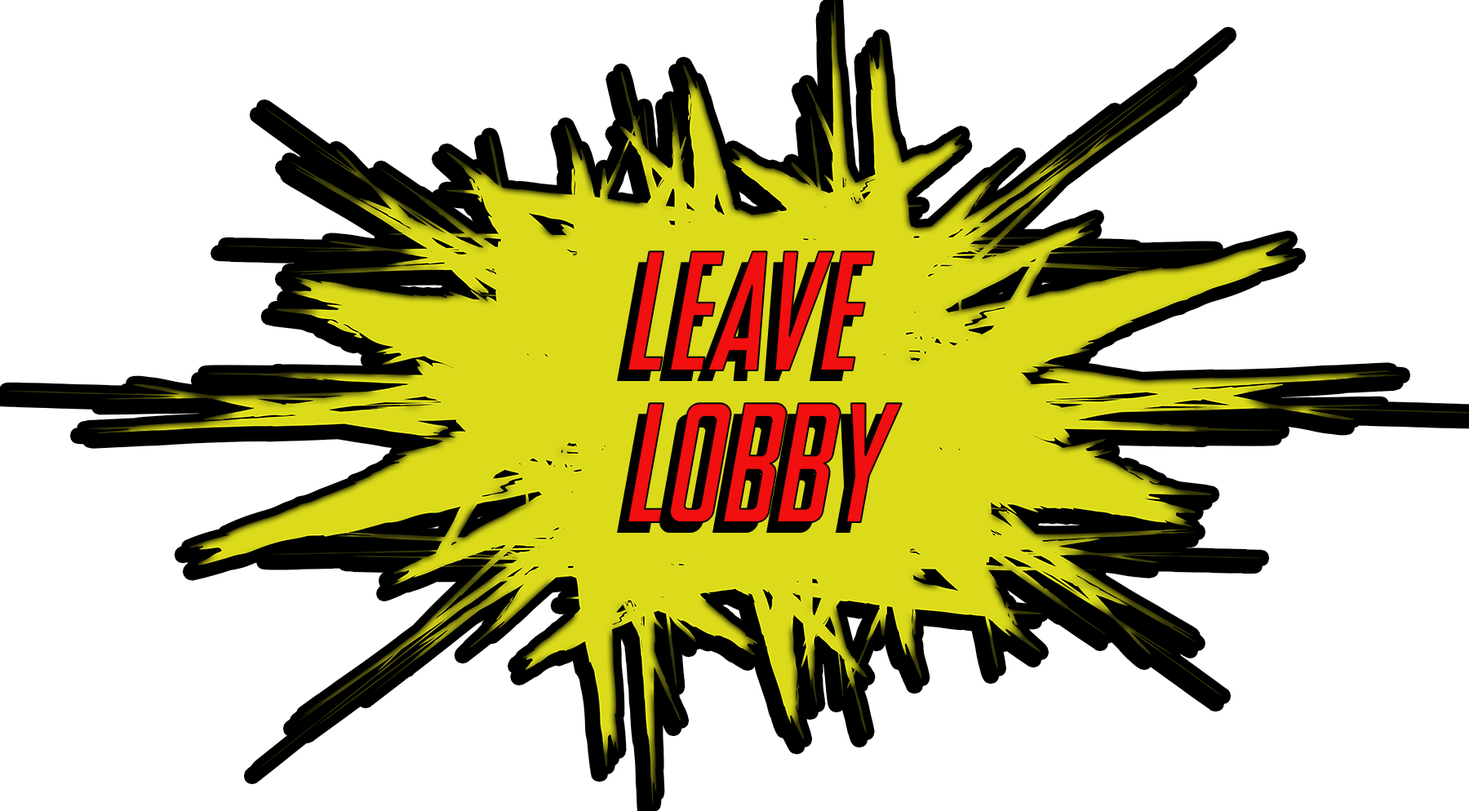
<style>
.page{position:relative;width:1469px;height:811px;background:#ffffff}
.page>*{position:absolute;margin:0}
.t1{font:170.1px "SNES-Italic";color:#f10f0f}
</style>
<div class="page">
<p class="t1" style="left:628px;top:251px;width:246px;height:120px">Leave</p>
<p class="t1" style="left:628px;top:403px;width:274px;height:119px">Lobby</p>
</div>
